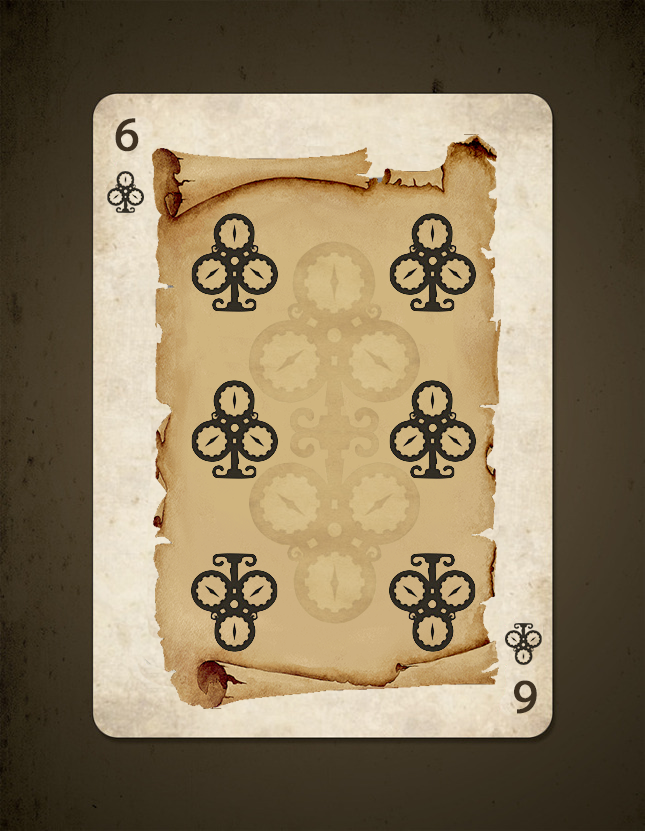
<style>
.page{position:relative;width:645px;height:831px}
.page>*{position:absolute;margin:0}
.t1{font:48px "MyriadPro-Regular";color:#3f3222;font-weight:bold}
</style>
<div class="page">
<p class="t1" style="left:115px;top:118px;width:24px;height:34px">6</p>
<p class="t1" style="left:514px;top:680px;width:23px;height:34px;rotate:180deg">6</p>
</div>
